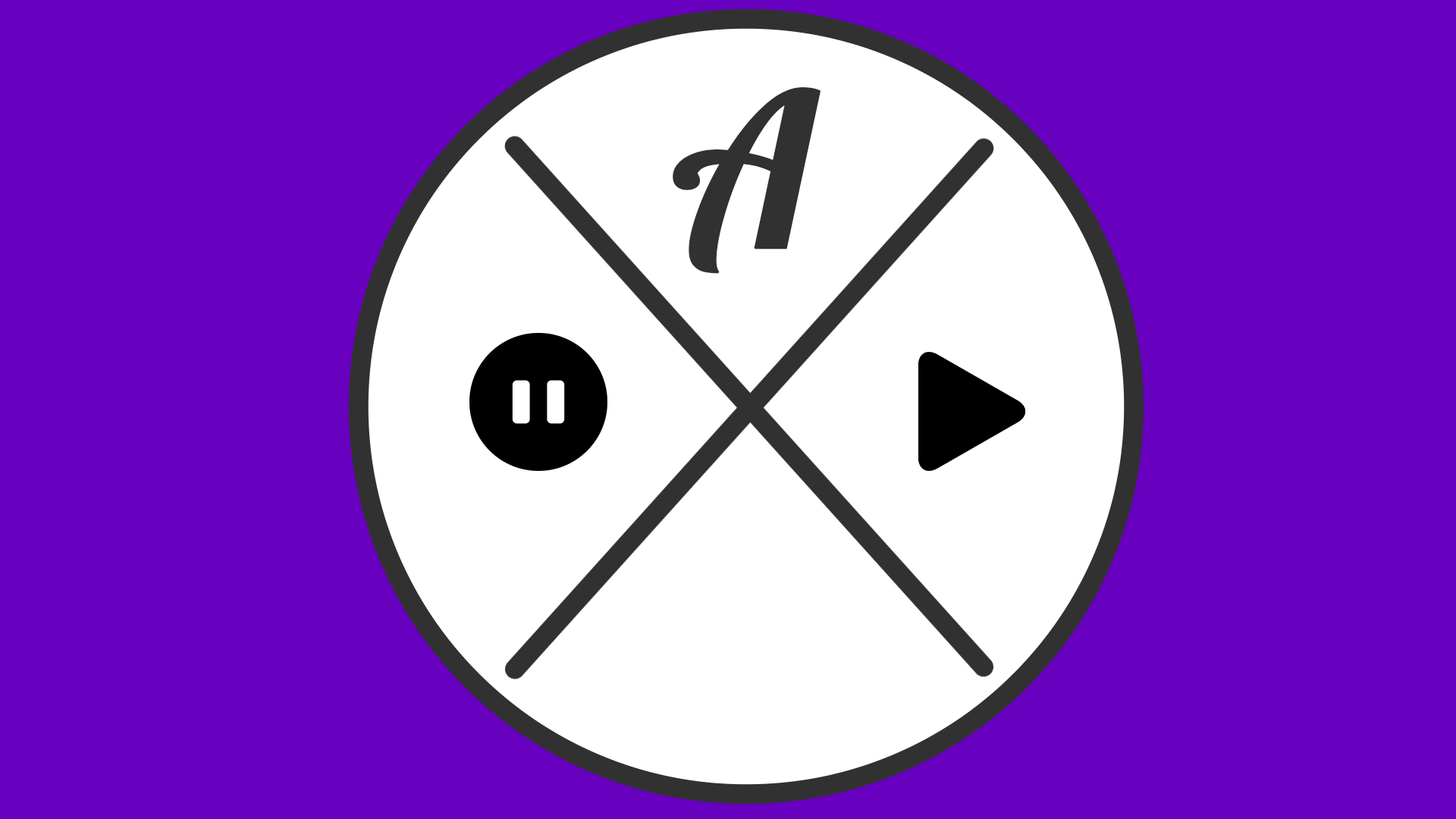
<style>
.page{position:relative;width:1456px;height:819px;background:#6700bf}
.page>*{position:absolute;margin:0}
.t1{font:212.9px "Lobster-Regular";letter-spacing:0.04em;color:#313131;font-weight:bold}
</style>
<div class="page">
<p class="t1" style="left:673px;top:87px;width:148px;height:187px">A</p>
</div>
